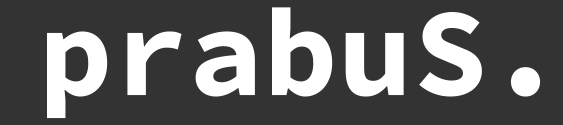
<style>
.page{position:relative;width:563px;height:125px;background:#333333}
.page>*{position:absolute;margin:0}
.t1{font:125px "SourceCodePro-Bold";color:#ffffff}
</style>
<div class="page">
<p class="t1" style="left:47px;top:7px;width:494px;height:112px">prabuS.</p>
</div>
